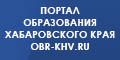
<style>
.page{position:relative;width:120px;height:60px}
.page>*{position:absolute;margin:0}
.t1{font:10px/12px "CenturyGothic-Bold";color:#ffffff;text-transform:uppercase}
</style>
<div class="page">
<p class="t1" style="left:5px;top:7px;width:110px;height:43px;text-align:center">ПОРТАЛ<br>ОБРАЗОВАНИЯ<br>ХАБАРОВСКОГО КРАЯ<br>OBR-KHV.RU</p>
</div>
